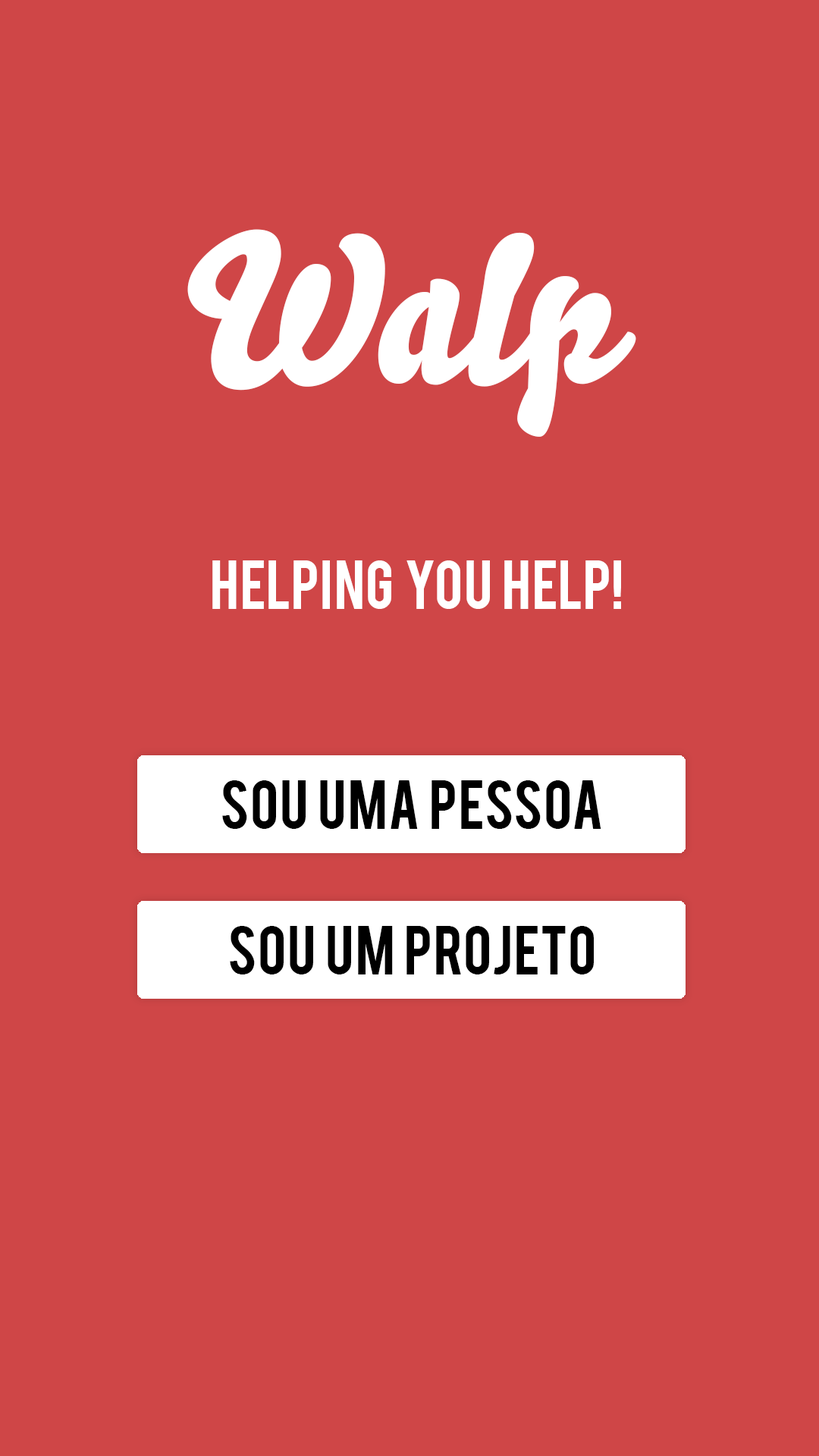
<style>
.page{position:relative;width:819px;height:1456px;background:#cf4647}
.page>*{position:absolute;margin:0}
.t1{font:206.2px "Bello-Pro";color:#ffffff}
.t2{font:54.6px "Bebas";color:#ffffff}
.t3{font:54.6px "Bebas";color:#000000}
</style>
<div class="page">
<p class="t1" style="left:187px;top:229px;width:449px;height:208px">Walp</p>
<p class="t2" style="left:212px;top:560px;width:409px;height:49px">Helping  you  help!</p>
<p class="t3" style="left:222px;top:780px;width:379px;height:49px">Sou  uma  pessoa</p>
<p class="t3" style="left:230px;top:926px;width:364px;height:48px">Sou  um  projeto</p>
</div>
